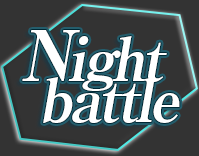
<style>
.page{position:relative;width:199px;height:156px;background:#333333}
.page>*{position:absolute;margin:0}
.t1{font:60px/50px "RyuminPro-ExBold";letter-spacing:-0.06em;color:#ffffff;font-style:italic}
.t2{font:70px/50px "RyuminPro-ExBold";letter-spacing:-0.06em;color:#ffffff;font-style:italic}
</style>
<div class="page">
<p class="t1" style="left:22px;top:30px;width:158px;height:93px;text-align:center"><span class="t2">N</span>ight<br>  battle</p>
</div>
